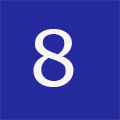
<style>
.page{position:relative;width:120px;height:120px;background:#252b9f}
.page>*{position:absolute;margin:0}
.t1{font:77.2px "Verdana";color:#faf5f5}
</style>
<div class="page">
<p class="t1" style="left:33px;top:29px;width:41px;height:58px">8</p>
</div>
